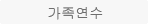
<style>
.page{position:relative;width:148px;height:24px;background:#f7f7f7}
.page>*{position:absolute;margin:0}
.t1{font:14px "Gulim";color:#6e6e6e}
</style>
<div class="page">
<p class="t1" style="left:48px;top:7px;width:55px;height:13px">가족연수</p>
</div>
